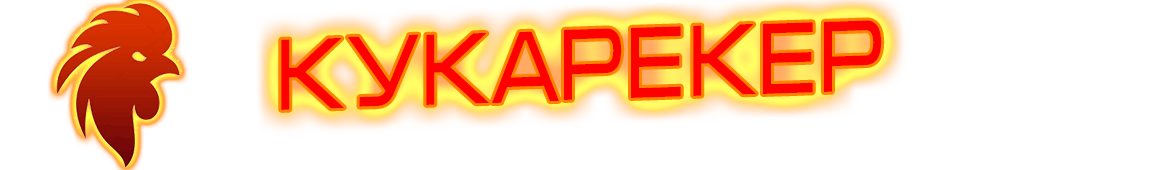
<style>
.page{position:relative;width:1170px;height:170px;background:#ffffff}
.page>*{position:absolute;margin:0}
.t1{font:102.2px "MicraC";color:#ff0000;scale:0.74 1}
</style>
<div class="page">
<p class="t1" style="left:281px;top:20px;width:601px;height:90px;rotate:-2deg">КУКАРЕКЕР</p>
</div>
